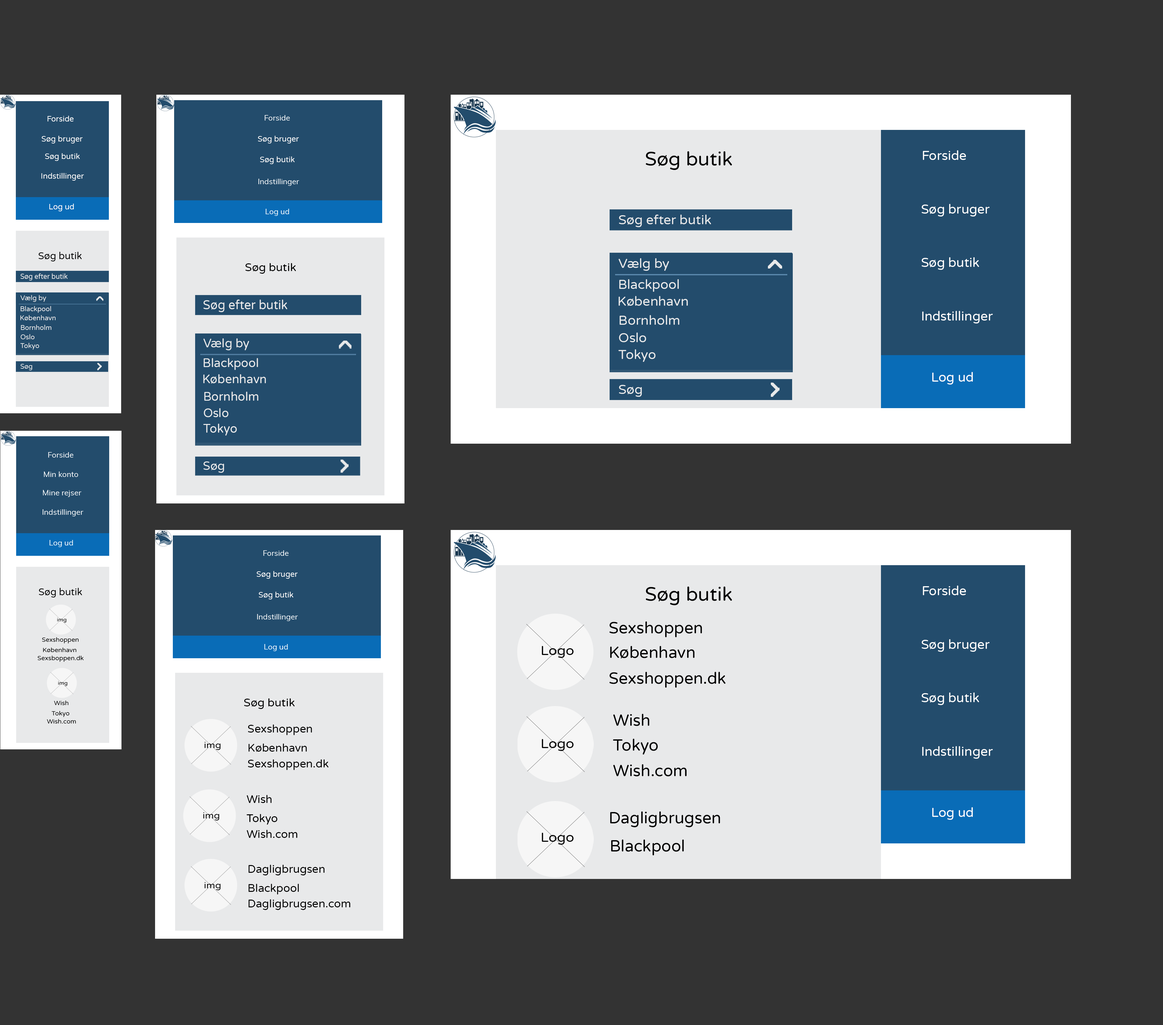
<style>
.page{position:relative;width:1163px;height:1025px;background:#333333}
.page>*{position:absolute;margin:0}
.t1{font:7.8px "VarelaRound-Regular";color:#ffffff}
.t2{font:7.8px "Muli-Regular";color:#ffffff}
.t3{font:19.4px "VarelaRound-Regular";color:#000000}
.t4{font:12.9px "VarelaRound-Regular";color:#ffffff}
.t5{font:13.2px "VarelaRound-Regular";color:#e8e9ea}
.t6{font:9.7px "VarelaRound-Regular";color:#000000}
.t7{font:11.3px "VarelaRound-Regular";color:#000000}
.t8{font:7.1px "VarelaRound-Regular";color:#e8e9ea;scale:0.95 1}
.t9{font:6.9px "VarelaRound-Regular";color:#e8e9ea;scale:0.97 1}
.t10{font:12.7px "VarelaRound-Regular";color:#e8e9ea;scale:0.95 1}
.t11{font:12.4px "VarelaRound-Regular";color:#e8e9ea;scale:0.97 1}
.t12{font:6.7px "VarelaRound-Regular";color:#e8e9ea}
.t13{font:11.9px "VarelaRound-Regular";color:#e8e9ea}
.t14{font:5px "VarelaRound-Regular";color:#000000;scale:1.1 1}
.t15{font:16.2px "VarelaRound-Regular";color:#000000}
.t16{font:6.3px "VarelaRound-Regular";color:#000000}
.t17{font:12.7px "VarelaRound-Regular";color:#000000;scale:1.1 1}
.t18{font:11.1px "VarelaRound-Regular";color:#000000}
.t19{font:8.7px "VarelaRound-Regular";color:#000000;scale:1.1 1}
</style>
<div class="page">
<p class="t1" style="left:48px;top:116px;width:26px;height:6px">Forside</p>
<p class="t2" style="left:265px;top:115px;width:25px;height:6px">Forside</p>
<p class="t1" style="left:42px;top:136px;width:41px;height:7px">Søg bruger</p>
<p class="t1" style="left:258px;top:136px;width:41px;height:7px">Søg bruger</p>
<p class="t1" style="left:45px;top:153px;width:35px;height:8px">Søg butik</p>
<p class="t1" style="left:260px;top:156px;width:35px;height:8px">Søg butik</p>
<p class="t3" style="left:646px;top:151px;width:86px;height:19px">Søg butik</p>
<p class="t4" style="left:923px;top:150px;width:43px;height:10px">Forside</p>
<p class="t1" style="left:41px;top:173px;width:43px;height:8px">Indstillinger</p>
<p class="t2" style="left:259px;top:179px;width:40px;height:7px">Indstillinger</p>
<p class="t1" style="left:49px;top:204px;width:25px;height:7px">Log ud</p>
<p class="t2" style="left:266px;top:209px;width:23px;height:7px">Log ud</p>
<p class="t4" style="left:922px;top:204px;width:68px;height:13px">Søg bruger</p>
<p class="t5" style="left:619px;top:215px;width:92px;height:12px">Søg efter butik</p>
<p class="t6" style="left:38px;top:252px;width:44px;height:9px">Søg butik</p>
<p class="t5" style="left:619px;top:258px;width:50px;height:12px">Vælg by</p>
<p class="t4" style="left:922px;top:257px;width:57px;height:13px">Søg butik</p>
<p class="t7" style="left:245px;top:263px;width:51px;height:11px">Søg butik</p>
<p class="t5" style="left:619px;top:258px;width:50px;height:13px">Vælg by</p>
<p class="t8" style="left:20px;top:273px;width:48px;height:7px">Søg efter butik</p>
<p class="t5" style="left:619px;top:279px;width:60px;height:13px">Blackpool</p>
<p class="t9" style="left:20px;top:295px;width:26px;height:7px">Vælg by</p>
<p class="t9" style="left:20px;top:295px;width:26px;height:7px">Vælg by</p>
<p class="t10" style="left:203px;top:300px;width:84px;height:12px">Søg efter butik</p>
<p class="t5" style="left:619px;top:296px;width:69px;height:10px">København</p>
<p class="t9" style="left:20px;top:306px;width:31px;height:7px">Blackpool</p>
<p class="t9" style="left:20px;top:315px;width:36px;height:5px">København</p>
<p class="t5" style="left:620px;top:315px;width:60px;height:10px">Bornholm</p>
<p class="t4" style="left:922px;top:311px;width:71px;height:12px">Indstillinger</p>
<p class="t9" style="left:21px;top:325px;width:30px;height:5px">Bornholm</p>
<p class="t9" style="left:21px;top:334px;width:14px;height:5px">Oslo</p>
<p class="t11" style="left:203px;top:338px;width:46px;height:12px">Vælg by</p>
<p class="t11" style="left:203px;top:338px;width:46px;height:12px">Vælg by</p>
<p class="t5" style="left:619px;top:333px;width:27px;height:9px">Oslo</p>
<p class="t9" style="left:20px;top:343px;width:19px;height:7px">Tokyo</p>
<p class="t5" style="left:619px;top:349px;width:37px;height:13px">Tokyo</p>
<p class="t12" style="left:20px;top:364px;width:12px;height:6px">Søg</p>
<p class="t11" style="left:204px;top:358px;width:54px;height:12px">Blackpool</p>
<p class="t11" style="left:203px;top:374px;width:63px;height:10px">København</p>
<p class="t4" style="left:932px;top:372px;width:41px;height:13px">Log ud</p>
<p class="t5" style="left:619px;top:385px;width:23px;height:12px">Søg</p>
<p class="t11" style="left:204px;top:392px;width:55px;height:9px">Bornholm</p>
<p class="t11" style="left:204px;top:408px;width:24px;height:9px">Oslo</p>
<p class="t11" style="left:203px;top:424px;width:34px;height:12px">Tokyo</p>
<p class="t2" style="left:48px;top:452px;width:26px;height:6px">Forside</p>
<p class="t13" style="left:203px;top:461px;width:21px;height:12px">Søg</p>
<p class="t2" style="left:44px;top:471px;width:34px;height:6px">Min konto</p>
<p class="t2" style="left:43px;top:490px;width:38px;height:7px">Mine rejser</p>
<p class="t2" style="left:43px;top:509px;width:40px;height:7px">Indstillinger</p>
<p class="t2" style="left:49px;top:540px;width:24px;height:7px">Log ud</p>
<p class="t2" style="left:263px;top:550px;width:26px;height:6px">Forside</p>
<p class="t1" style="left:257px;top:571px;width:41px;height:8px">Søg bruger</p>
<p class="t6" style="left:39px;top:588px;width:43px;height:9px">Søg butik</p>
<p class="t1" style="left:259px;top:592px;width:34px;height:7px">Søg butik</p>
<p class="t3" style="left:646px;top:587px;width:86px;height:18px">Søg butik</p>
<p class="t4" style="left:923px;top:586px;width:43px;height:9px">Forside</p>
<p class="t14" style="left:57px;top:618px;width:10px;height:5px">img</p>
<p class="t2" style="left:257px;top:614px;width:41px;height:7px">Indstillinger</p>
<p class="t15" style="left:609px;top:621px;width:93px;height:16px">Sexshoppen</p>
<p class="t16" style="left:42px;top:637px;width:37px;height:6px">Sexshoppen</p>
<p class="t4" style="left:922px;top:639px;width:68px;height:13px">Søg bruger</p>
<p class="t16" style="left:43px;top:648px;width:34px;height:4px">København</p>
<p class="t2" style="left:264px;top:644px;width:24px;height:7px">Log ud</p>
<p class="t17" style="left:542px;top:646px;width:32px;height:12px">Logo</p>
<p class="t15" style="left:610px;top:646px;width:85px;height:13px">København</p>
<p class="t16" style="left:37px;top:656px;width:47px;height:6px">Sexsboppen.dk</p>
<p class="t15" style="left:609px;top:672px;width:117px;height:16px">Sexshoppen.dk</p>
<p class="t14" style="left:58px;top:681px;width:10px;height:5px">img</p>
<p class="t16" style="left:54px;top:701px;width:15px;height:4px">Wish</p>
<p class="t7" style="left:244px;top:698px;width:51px;height:11px">Søg butik</p>
<p class="t4" style="left:922px;top:693px;width:57px;height:12px">Søg butik</p>
<p class="t16" style="left:52px;top:711px;width:17px;height:6px">Tokyo</p>
<p class="t15" style="left:613px;top:714px;width:37px;height:12px">Wish</p>
<p class="t16" style="left:47px;top:719px;width:29px;height:5px">Wish.com</p>
<p class="t18" style="left:248px;top:724px;width:64px;height:11px">Sexshoppen</p>
<p class="t19" style="left:205px;top:742px;width:16px;height:8px">img</p>
<p class="t18" style="left:248px;top:744px;width:59px;height:8px">København</p>
<p class="t17" style="left:542px;top:739px;width:32px;height:12px">Logo</p>
<p class="t15" style="left:613px;top:739px;width:45px;height:16px">Tokyo</p>
<p class="t4" style="left:922px;top:746px;width:71px;height:13px">Indstillinger</p>
<p class="t18" style="left:248px;top:759px;width:81px;height:11px">Sexshoppen.dk</p>
<p class="t15" style="left:613px;top:764px;width:74px;height:13px">Wish.com</p>
<p class="t18" style="left:247px;top:795px;width:25px;height:8px">Wish</p>
<p class="t4" style="left:932px;top:807px;width:41px;height:13px">Log ud</p>
<p class="t19" style="left:203px;top:812px;width:16px;height:8px">img</p>
<p class="t18" style="left:247px;top:814px;width:31px;height:11px">Tokyo</p>
<p class="t15" style="left:610px;top:811px;width:110px;height:16px">Dagligbrugsen</p>
<p class="t18" style="left:247px;top:830px;width:51px;height:8px">Wish.com</p>
<p class="t17" style="left:542px;top:833px;width:32px;height:12px">Logo</p>
<p class="t15" style="left:611px;top:840px;width:73px;height:15px">Blackpool</p>
<p class="t18" style="left:248px;top:865px;width:77px;height:10px">Dagligbrugsen</p>
<p class="t19" style="left:205px;top:882px;width:16px;height:8px">img</p>
<p class="t18" style="left:248px;top:884px;width:51px;height:10px">Blackpool</p>
<p class="t18" style="left:248px;top:899px;width:103px;height:11px">Dagligbrugsen.com</p>
</div>
